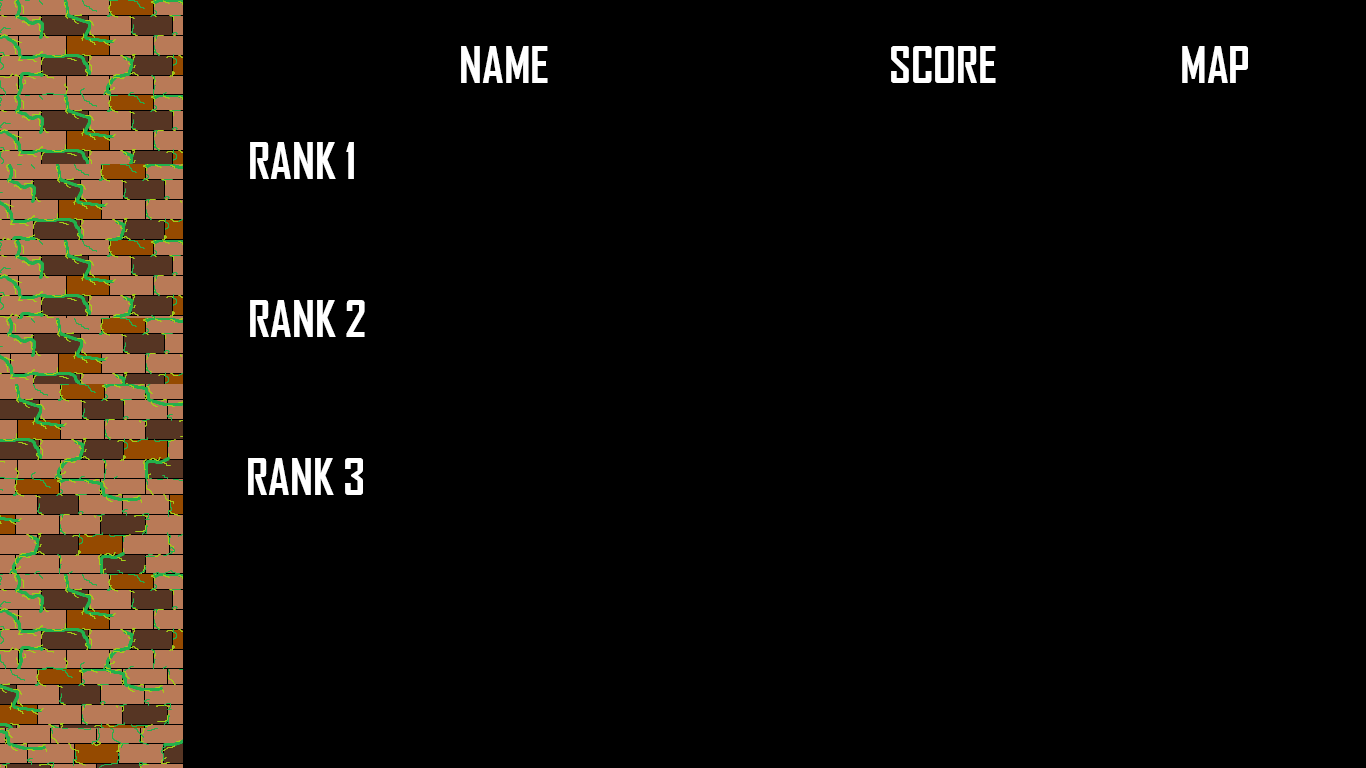
<style>
.page{position:relative;width:1366px;height:768px;background:#000000}
.page>*{position:absolute;margin:0}
.t1{font:48px "AgencyFB-Bold";color:#ffffff}
</style>
<div class="page">
<p class="t1" style="left:461px;top:46px;width:87px;height:37px">NAME</p>
<p class="t1" style="left:891px;top:46px;width:105px;height:37px">SCORE</p>
<p class="t1" style="left:1182px;top:46px;width:66px;height:37px">MAP</p>
<p class="t1" style="left:250px;top:142px;width:104px;height:37px">RANK 1</p>
<p class="t1" style="left:250px;top:300px;width:115px;height:37px">RANK 2</p>
<p class="t1" style="left:248px;top:458px;width:115px;height:37px">RANK 3</p>
</div>
